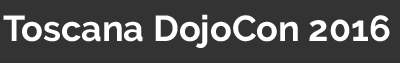
<style>
.page{position:relative;width:400px;height:63px;background:#333333}
.page>*{position:absolute;margin:0}
.t1{font:36px "Raleway-Bold";color:#ffffff}
</style>
<div class="page">
<p class="t1" style="left:3px;top:14px;width:387px;height:34px">Toscana DojoCon 2016</p>
</div>
